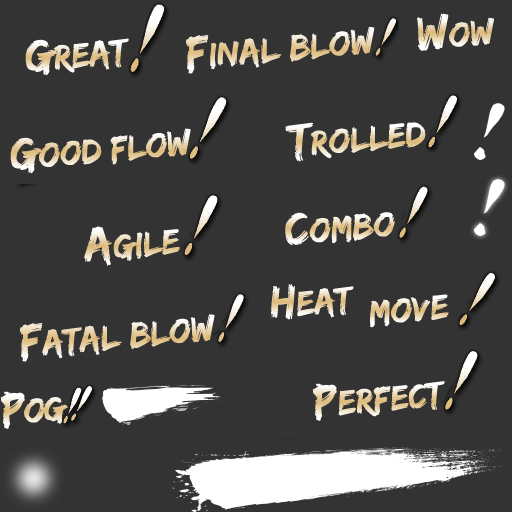
<style>
.page{position:relative;width:512px;height:512px;background:#333333}
.page>*{position:absolute;margin:0}
.t1{font:36px "EdoSZ"}
.t2{font:48px "EdoSZ"}
.t3{font:36px "EdoSZ";letter-spacing:-0.01em}
.t4{font:48px "EdoSZ";letter-spacing:-0.01em}
.t5{font:36px "EdoSZ";letter-spacing:-0.05em}
.t6{font:48px "EdoSZ";letter-spacing:-0.05em}
</style>
<div class="page">
<p class="t1" style="left:417px;top:13px;width:77px;height:38px;rotate:-5deg"><span class="t2">w</span>ow</p>
<p class="t1" style="left:186px;top:26px;width:189px;height:48px;rotate:-5deg"><span class="t2">F</span>INAL BLOW</p>
<p class="t1" style="left:25px;top:38px;width:104px;height:38px;rotate:-5deg"><span class="t2">G</span>REAT</p>
<p class="t1" style="left:285px;top:122px;width:141px;height:40px;rotate:-5deg"><span class="t2">t</span>rolled</p>
<p class="t3" style="left:10px;top:128px;width:181px;height:46px;rotate:-5deg"><span class="t4">g</span>ood flow</p>
<p class="t1" style="left:285px;top:212px;width:110px;height:33px;rotate:-5deg"><span class="t2">c</span>ombo</p>
<p class="t1" style="left:84px;top:226px;width:96px;height:40px;rotate:-5deg"><span class="t2">A</span>GILE</p>
<p class="t1" style="left:271px;top:284px;width:83px;height:36px;rotate:-5deg"><span class="t2">h</span>eat</p>
<p class="t1" style="left:370px;top:294px;width:79px;height:34px;rotate:-5deg">MOVE</p>
<p class="t1" style="left:20px;top:314px;width:195px;height:48px;rotate:-5deg"><span class="t2">f</span>atal blow</p>
<p class="t1" style="left:312px;top:381px;width:133px;height:40px;rotate:-5deg"><span class="t2">P</span>ERFECT</p>
<p class="t5" style="left:0px;top:391px;width:68px;height:38px;rotate:-5deg"><span class="t6">p</span>og</p>
</div>
